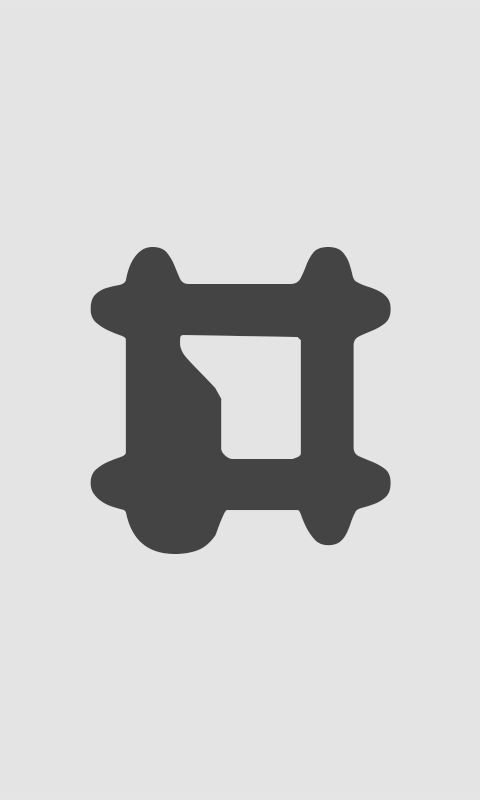
<style>
.page{position:relative;width:480px;height:800px;background:#e4e4e4}
.page>*{position:absolute;margin:0}
.t1{font:462.8px "ChintzyCPUBRK";letter-spacing:0.5em;color:#444444}
</style>
<div class="page">
<p class="t1" style="left:90px;top:247px;width:301px;height:307px">#</p>
</div>
